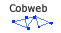
<style>
.page{position:relative;width:61px;height:33px;background:#ffffff}
.page>*{position:absolute;margin:0}
.t1{font:10px "Tahoma";color:#363636;font-weight:bold}
</style>
<div class="page">
<p class="t1" style="left:9px;top:4px;width:38px;height:8px">Cobweb</p>
</div>
